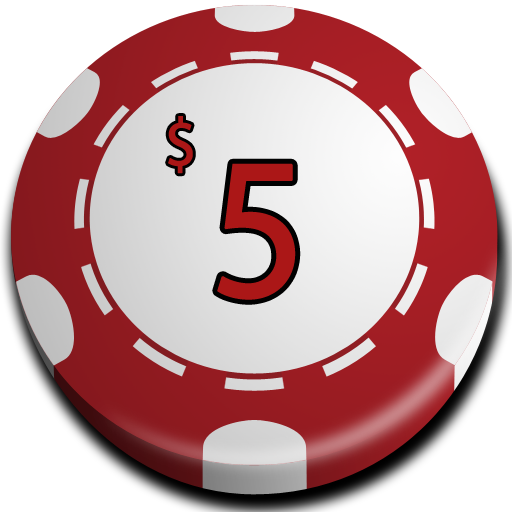
<style>
.page{position:relative;width:512px;height:512px;background:#ffffff}
.page>*{position:absolute;margin:0}
.t1{font:117.9px "MyriadPro-Regular";letter-spacing:-0.05em;color:#ab1717;font-variant:small-caps;font-weight:bold;scale:0.92 1}
.t2{font:346.9px "MyriadPro-Regular";letter-spacing:-0.05em;color:#ab1717;font-variant:small-caps;font-weight:bold;scale:0.92 1}
</style>
<div class="page">
<p class="t1" style="left:168px;top:116px;width:25px;height:58px">$</p>
<p class="t2" style="left:217px;top:163px;width:79px;height:137px">5</p>
</div>
